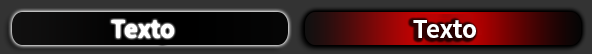
<style>
.page{position:relative;width:592px;height:54px}
.page>*{position:absolute;margin:0}
.t1{font:24.4px "NotoSansCJKjp-Bold";color:#ffffff}
</style>
<div class="page">
<p class="t1" style="left:111px;top:20px;width:63px;height:18px">Texto</p>
<p class="t1" style="left:413px;top:20px;width:63px;height:18px">Texto</p>
</div>
